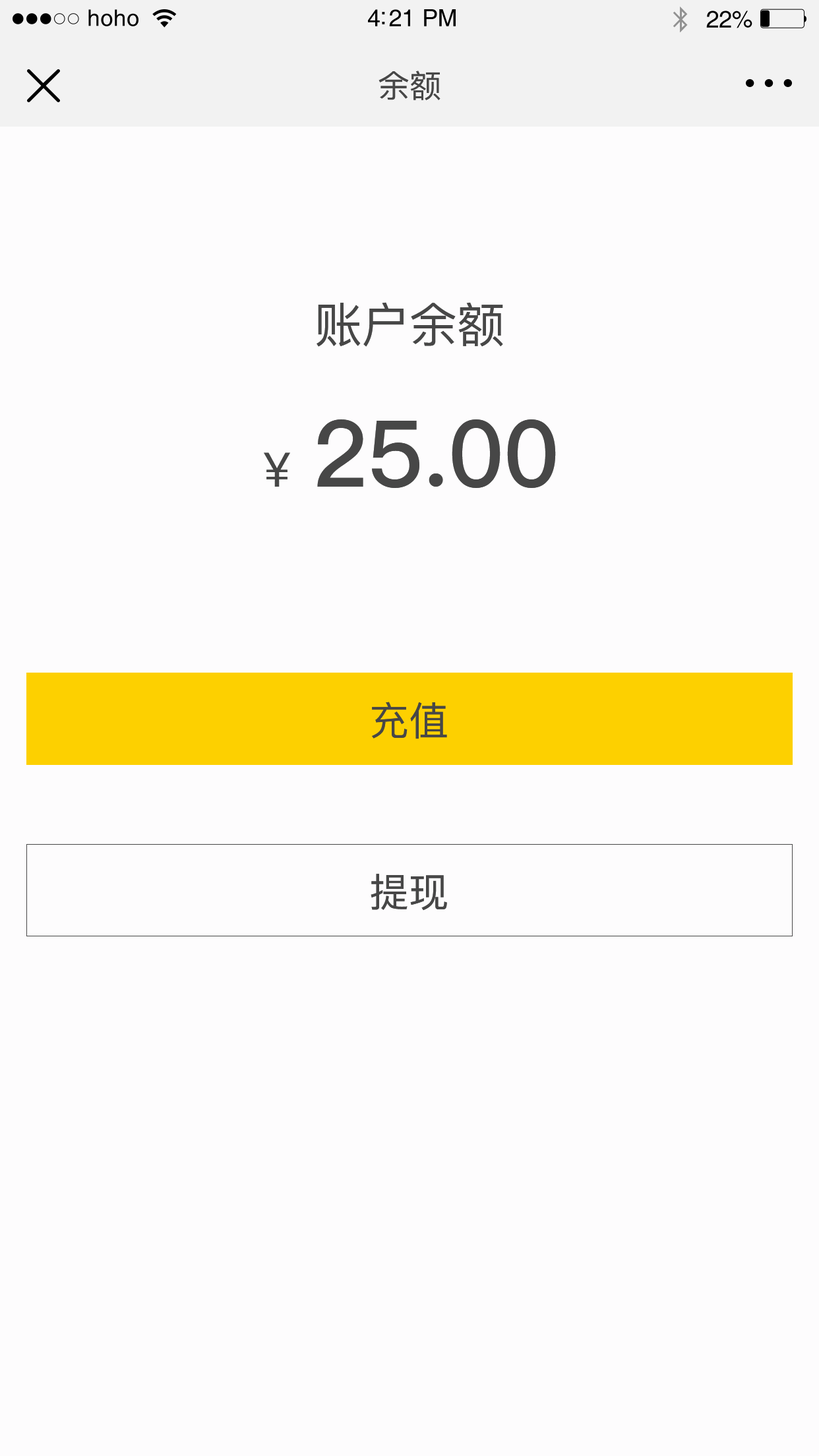
<style>
.page{position:relative;width:819px;height:1456px;background:#fdfcfd}
.page>*{position:absolute;margin:0}
.t1{font:22.8px "Helvetica";letter-spacing:0.02em;color:#000000}
.t2{font:23.8px "Helvetica";letter-spacing:-0.02em;color:#000000}
.t3{font:31.7px "PingFang-SC-Medium";color:#474747}
.t4{font:47.5px "PingFang-SC-Medium";color:#474747}
.t5{font:92.3px "PingFang-SC-Bold";color:#474747}
.t6{font:39.6px "PingFang-SC-Medium";color:#474747}
</style>
<div class="page">
<p class="t1" style="left:88px;top:9px;width:50px;height:17px">hoho</p>
<p class="t2" style="left:368px;top:9px;width:88px;height:17px">4:21 PM</p>
<p class="t2" style="left:706px;top:11px;width:46px;height:17px">22%</p>
<p class="t3" style="left:379px;top:71px;width:61px;height:29px">余额</p>
<p class="t4" style="left:317px;top:302px;width:186px;height:45px">账户余额</p>
<p class="t5" style="left:317px;top:419px;width:239px;height:69px">25.00</p>
<p class="t4" style="left:264px;top:452px;width:26px;height:35px">￥</p>
<p class="t6" style="left:372px;top:702px;width:75px;height:37px">充值</p>
<p class="t6" style="left:371px;top:874px;width:76px;height:37px">提现</p>
</div>
